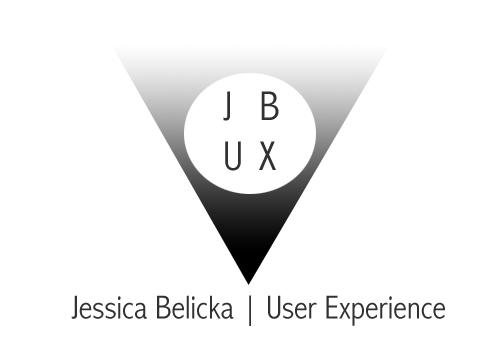
<style>
.page{position:relative;width:500px;height:357px;background:#ffffff}
.page>*{position:absolute;margin:0}
.t1{font:41.7px "AbadiMT-CondensedLight";color:#30322f}
.t2{font:33.3px "AbadiMT-CondensedLight";color:#30322f}
</style>
<div class="page">
<p class="t1" style="left:223px;top:91px;width:56px;height:80px">J B<br>U X</p>
<p class="t2" style="left:71px;top:295px;width:374px;height:31px">Jessica Belicka | User Experience</p>
</div>
